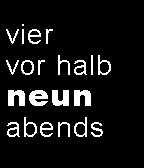
<style>
.page{position:relative;width:144px;height:168px;background:#000000}
.page>*{position:absolute;margin:0}
.t1{font:28px "ArialMT";letter-spacing:0.04em;color:#ffffff}
.t2{font:30.7px "Arial-Black";letter-spacing:0.04em;color:#ffffff}
</style>
<div class="page">
<p class="t1" style="left:6px;top:24px;width:47px;height:20px">vier</p>
<p class="t1" style="left:6px;top:55px;width:105px;height:20px">vor halb</p>
<p class="t2" style="left:8px;top:90px;width:83px;height:16px">neun</p>
<p class="t1" style="left:7px;top:117px;width:96px;height:20px">abends</p>
</div>
